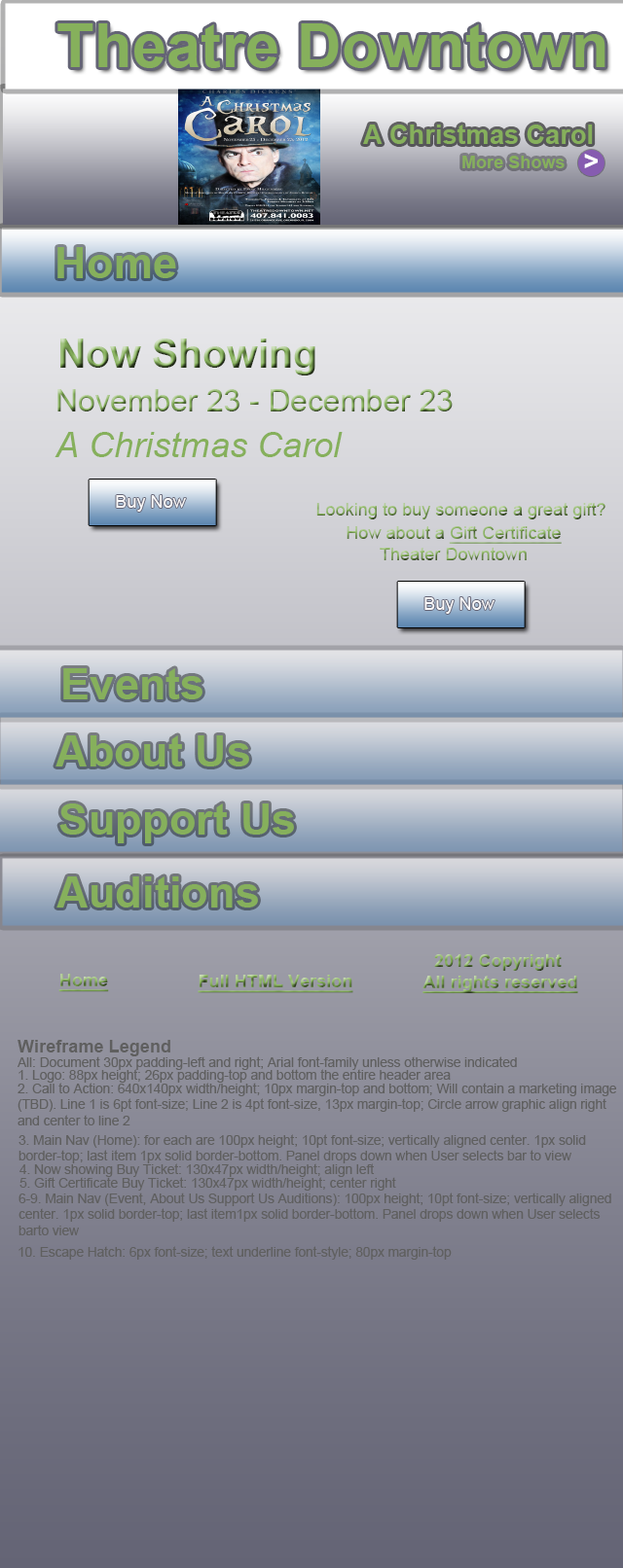
<style>
.page{position:relative;width:623px;height:1568px}
.page>*{position:absolute;margin:0}
.t1{font:61.7px "Arial-BoldMT";color:#86b05c}
.t2{font:26.4px "Arial-BoldMT";color:#86b05c}
.t3{font:17.6px "Arial-BoldMT";color:#86b05c}
.t4{font:26.4px "Arial-BoldMT";color:#ffffff}
.t5{font:44px "Arial-BoldMT";color:#86b05c}
.t6{font:39.6px "Arial-BoldMT"}
.t7{font:30.8px "ArialMT"}
.t8{font:35.2px "Arial-ItalicMT";color:#86b05c}
.t9{font:17.6px "ArialMT";color:#ffffff}
.t10{font:17.6px "ArialMT"}
.t11{font:17.6px "ArialMT";text-decoration:underline}
.t12{font:17.6px "Arial-BoldMT";text-decoration:underline}
.t13{font:17.6px "Arial-BoldMT"}
.t14{font:17.6px "Arial-BoldMT";color:#5f5f5f}
.t15{font:13.2px "ArialMT";color:#5f5f5f}
</style>
<div class="page">
<p class="t1" style="left:57px;top:23px;width:548px;height:45px">Theatre Downtown</p>
<p class="t2" style="left:363px;top:125px;width:229px;height:19px">A Christmas Carol</p>
<p class="t3" style="left:462px;top:156px;width:102px;height:12px">More Shows</p>
<p class="t4" style="left:584px;top:154px;width:13px;height:14px">&gt;</p>
<p class="t5" style="left:57px;top:247px;width:119px;height:31px">Home</p>
<p class="t6" style="left:60px;top:339px;width:255px;height:36px">Now Showing</p>
<p class="t7" style="left:57px;top:389px;width:395px;height:22px">November 23 - December 23</p>
<p class="t8" style="left:54px;top:432px;width:288px;height:25px">A Christmas Carol</p>
<p class="t9" style="left:116px;top:495px;width:70px;height:17px">Buy Now</p>
<p class="t10" style="left:316px;top:503px;width:289px;height:16px">Looking to buy someone a great gift?</p>
<p class="t11" style="left:346px;top:526px;width:215px;height:34px;text-align:center"><span class="t10">How about a </span>Gift Certificate<br><span class="t10">Theater Downtown</span></p>
<p class="t9" style="left:424px;top:597px;width:70px;height:17px">Buy Now</p>
<p class="t5" style="left:63px;top:668px;width:139px;height:31px">Events</p>
<p class="t5" style="left:55px;top:735px;width:194px;height:31px">About Us</p>
<p class="t5" style="left:59px;top:803px;width:235px;height:40px">Support Us</p>
<p class="t5" style="left:56px;top:876px;width:202px;height:32px">Auditions</p>
<p class="t12" style="left:422px;top:954px;width:156px;height:40px;text-align:center"><span class="t13">2012 Copyright <br></span>All rights reserved</p>
<p class="t12" style="left:58px;top:974px;width:51px;height:18px">Home</p>
<p class="t12" style="left:197px;top:975px;width:156px;height:18px">Full HTML Version</p>
<p class="t14" style="left:18px;top:1040px;width:152px;height:16px">Wireframe Legend</p>
<p class="t15" style="left:18px;top:1056px;width:499px;height:14px">All: Document 30px padding-left and right; Arial font-family unless otherwise indicated</p>
<p class="t15" style="left:18px;top:1069px;width:432px;height:14px">1. Logo: 88px height; 26px padding-top and bottom the entire header area</p>
<p class="t15" style="left:18px;top:1083px;width:598px;height:42px">2. Call to Action: 640x140px width/height; 10px margin-top and bottom; Will contain a marketing image <br>(TBD). Line 1 is 6pt font-size; Line 2 is 4pt font-size, 13px margin-top; Circle arrow graphic align right <br>and center to line 2</p>
<p class="t15" style="left:18px;top:1134px;width:568px;height:29px">3. Main Nav (Home): for each are 100px height; 10pt font-size; vertically aligned center. 1px solid <br>border-top; last item 1px solid border-bottom. Panel drops down when User selects bar to view</p>
<p class="t15" style="left:19px;top:1163px;width:355px;height:14px">4. Now showing Buy Ticket: 130x47px width/height; align left</p>
<p class="t15" style="left:19px;top:1177px;width:377px;height:14px">5. Gift Certificate Buy Ticket: 130x47px width/height; center right</p>
<p class="t15" style="left:18px;top:1193px;width:593px;height:42px">6-9. Main Nav (Event, About Us Support Us Auditions): 100px height; 10pt font-size; vertically aligned <br>center. 1px solid border-top; last item1px solid border-bottom. Panel drops down when User selects <br>barto view</p>
<p class="t15" style="left:18px;top:1246px;width:433px;height:14px">10. Escape Hatch: 6px font-size; text underline font-style; 80px margin-top</p>
</div>
